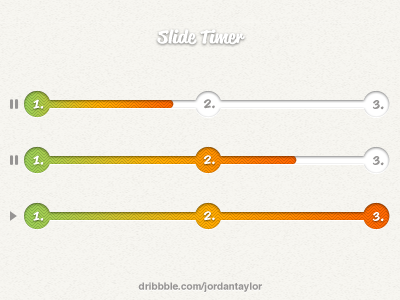
<style>
.page{position:relative;width:400px;height:300px;background:#f7f6f1}
.page>*{position:absolute;margin:0}
.t1{font:18px "ReklameScript-Bold";color:#ffffff}
.t2{font:12px "ReklameScript-Bold";color:#ffffff}
.t3{font:12px "ReklameScript-Bold";color:#969493}
.t4{font:10px "Helvetica-Bold";color:#969493}
</style>
<div class="page">
<p class="t1" style="left:157px;top:29px;width:88px;height:16px">Slide Timer</p>
<p class="t2" style="left:33px;top:99px;width:11px;height:10px">1.</p>
<p class="t3" style="left:203px;top:99px;width:12px;height:10px">2.</p>
<p class="t3" style="left:372px;top:100px;width:12px;height:10px">3.</p>
<p class="t2" style="left:33px;top:155px;width:11px;height:10px">1.</p>
<p class="t2" style="left:203px;top:155px;width:12px;height:10px">2.</p>
<p class="t3" style="left:372px;top:156px;width:12px;height:10px">3.</p>
<p class="t2" style="left:33px;top:211px;width:11px;height:10px">1.</p>
<p class="t2" style="left:203px;top:211px;width:12px;height:10px">2.</p>
<p class="t2" style="left:372px;top:212px;width:12px;height:10px">3.</p>
<p class="t4" style="left:138px;top:282px;width:124px;height:10px">dribbble.com/jordantaylor</p>
</div>
